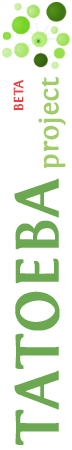
<style>
.page{position:relative;width:72px;height:450px;background:#ffffff}
.page>*{position:absolute;margin:0}
.t1{font:64px "Fontin-Regular";color:#6ca851;font-weight:bold}
.t2{font:28px "Fontin-Regular";color:#a1cc6c;font-weight:bold}
.t3{font:14px "Fontin-Regular";color:#e34444;font-weight:bold}
</style>
<div class="page">
<p class="t1" style="left:14px;top:77px;width:52px;height:368px;rotate:-90deg">TATOEBA <span class="t2">project</span></p>
<p class="t3" style="left:13px;top:80px;width:11px;height:31px;rotate:-90deg">BETA</p>
</div>
